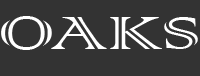
<style>
.page{position:relative;width:200px;height:76px;background:#333333}
.page>*{position:absolute;margin:0}
.t1{font:61.7px "ColonnaMT";color:#ffffff;scale:1.37 1}
</style>
<div class="page">
<p class="t1" style="left:1px;top:16px;width:197px;height:34px">OAKS</p>
</div>
